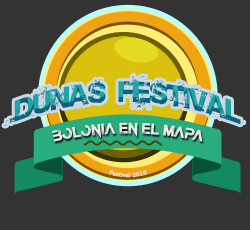
<style>
.page{position:relative;width:250px;height:230px;background:#333333}
.page>*{position:absolute;margin:0}
.t1{font:26px/125.7px "Base02"}
.t2{font:14px "TheLastCall";color:#ececec}
.t3{font:6px "Tahoma";color:#ececec}
</style>
<div class="page">
<p class="t1" style="left:4px;top:75px;width:240px;height:51px;text-align:center">dunas festival</p>
<p class="t2" style="left:52px;top:122px;width:151px;height:20px">bolonia en el mapa</p>
<p class="t3" style="left:109px;top:170px;width:38px;height:8px">Festival 2018</p>
</div>
